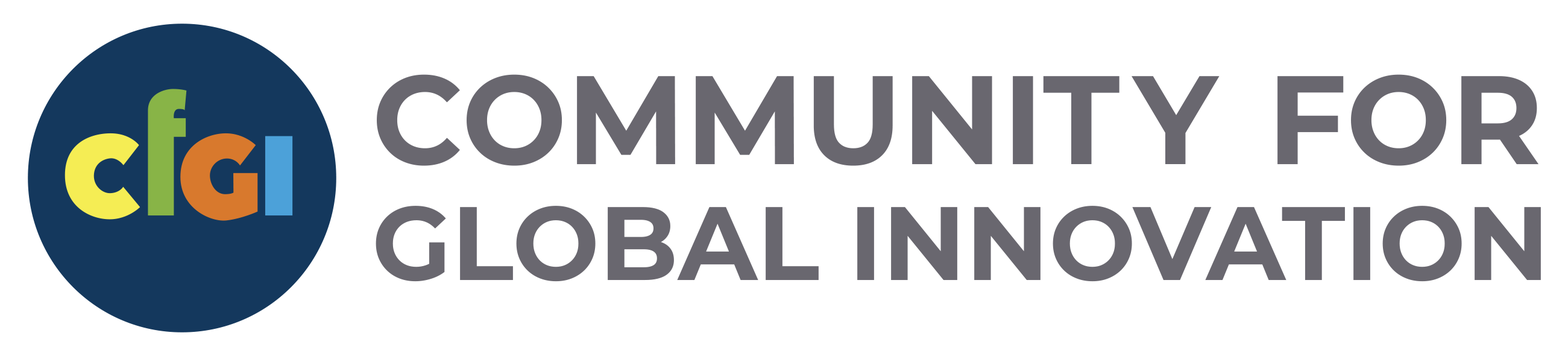
<style>
.page{position:relative;width:1568px;height:356px;background:#ffffff}
.page>*{position:absolute;margin:0}
.t1{font:104px/115.5px "Montserrat-Bold";color:#69676f;text-transform:uppercase}
.t2{font:125.6px/115.5px "Montserrat-Bold";color:#69676f;text-transform:uppercase}
.t3{font:125.6px/115.5px "Montserrat-Bold";letter-spacing:0.12em;color:#69676f;text-transform:uppercase}
</style>
<div class="page">
<p class="t1" style="left:376px;top:74px;width:1165px;height:208px"><span class="t2">Communi</span><span class="t3">ty</span><span class="t2"> for<br></span>Global Innovation</p>
</div>
